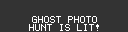
<style>
.page{position:relative;width:128px;height:32px;background:#333333}
.page>*{position:absolute;margin:0}
.t1{font:8px "Terminal";color:#ffffff}
</style>
<div class="page">
<p class="t1" style="left:32px;top:16px;width:65px;height:7px">GHOST PHOTO</p>
<p class="t1" style="left:29px;top:24px;width:70px;height:7px">HUNT IS LIT!</p>
</div>
